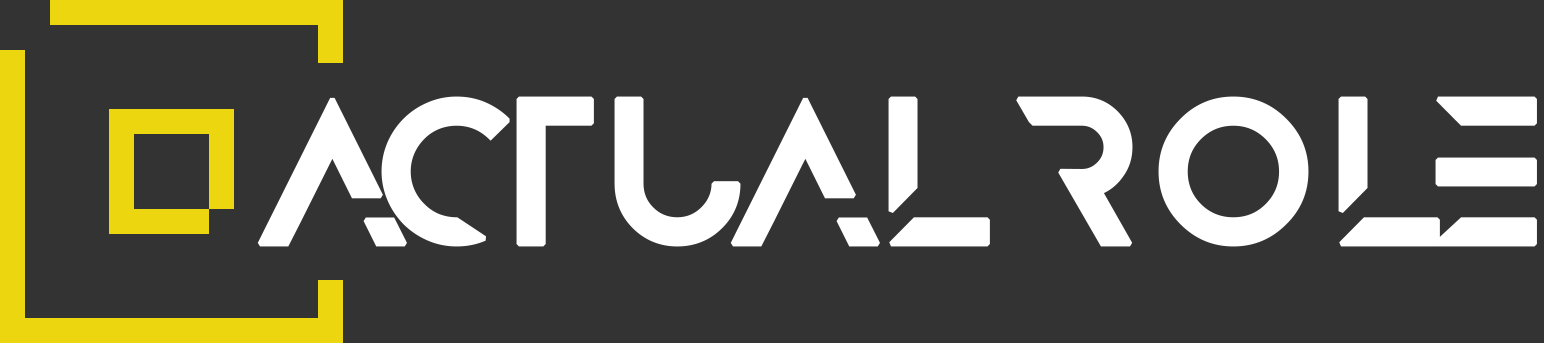
<style>
.page{position:relative;width:1544px;height:343px;background:#333333}
.page>*{position:absolute;margin:0}
.t1{font:181px "Anurati-Regular";color:#ffffff;font-weight:bold}
</style>
<div class="page">
<p class="t1" style="left:257px;top:96px;width:1280px;height:151px">ACTUAL ROLE</p>
</div>
